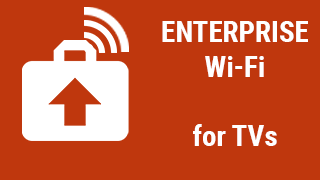
<style>
.page{position:relative;width:320px;height:180px;background:#bf370d}
.page>*{position:absolute;margin:0}
.t1{font:29px "RobotoCondensed-Bold";color:#ffffff}
</style>
<div class="page">
<p class="t1" style="left:162px;top:21px;width:146px;height:125px;text-align:center">ENTERPRISE<br>Wi-Fi<br><br>for TVs</p>
</div>
